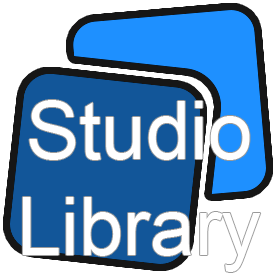
<style>
.page{position:relative;width:276px;height:274px;background:#ffffff}
.page>*{position:absolute;margin:0}
.t1{font:80px "ArialMT";color:#ffffff}
</style>
<div class="page">
<p class="t1" style="left:22px;top:100px;width:239px;height:172px;text-align:center">Studio<br>Library</p>
</div>
